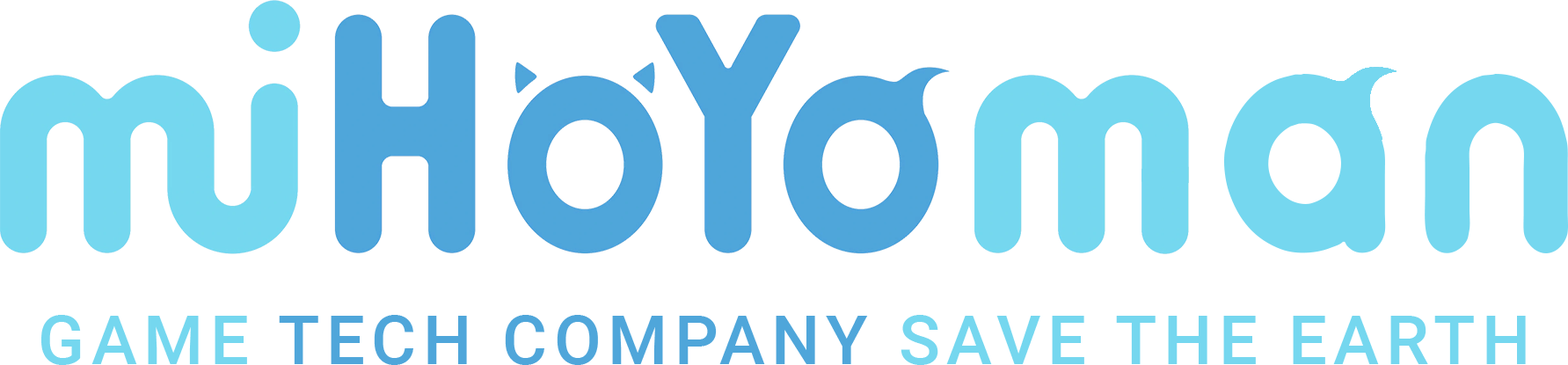
<style>
.page{position:relative;width:1568px;height:365px;background:#ffffff}
.page>*{position:absolute;margin:0}
.t1{font:68.4px "Roboto-Medium";letter-spacing:0.1em;color:#75d7ef}
.t2{font:68.4px "Roboto-Medium";letter-spacing:0.1em;color:#4fa6da}
</style>
<div class="page">
<p class="t1" style="left:41px;top:315px;width:1485px;height:50px">GAME <span class="t2">TECH COMPANY</span> SAVE THE EARTH</p>
</div>
